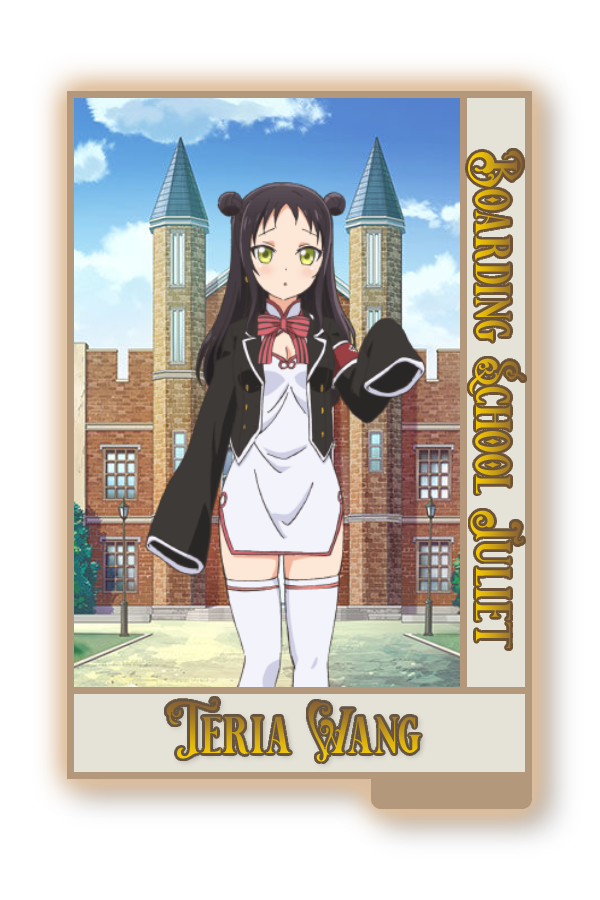
<style>
.page{position:relative;width:600px;height:900px;background:#ffffff}
.page>*{position:absolute;margin:0}
.t1{font:58.9px "VictorianDecadeDemoVersion"}
.t2{font:62.3px "VictorianDecadeDemoVersion"}
</style>
<div class="page">
<p class="t1" style="left:468px;top:150px;width:57px;height:498px;rotate:90deg">Boarding School Juliet</p>
<p class="t2" style="left:162px;top:698px;width:260px;height:64px">Teria Wang</p>
</div>
